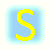
<style>
.page{position:relative;width:50px;height:50px;background:#fffff8}
.page>*{position:absolute;margin:0}
.t1{font:50px "Calibri";color:#ffff00}
</style>
<div class="page">
<p class="t1" style="left:16px;top:9px;width:19px;height:32px">S</p>
</div>
